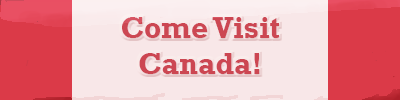
<style>
.page{position:relative;width:400px;height:100px;background:#f8e7e8}
.page>*{position:absolute;margin:0}
.t1{font:30px "Rockwell-Bold";color:#cc4752}
</style>
<div class="page">
<p class="t1" style="left:122px;top:17px;width:157px;height:57px;text-align:center">Come Visit<br>Canada!</p>
</div>
